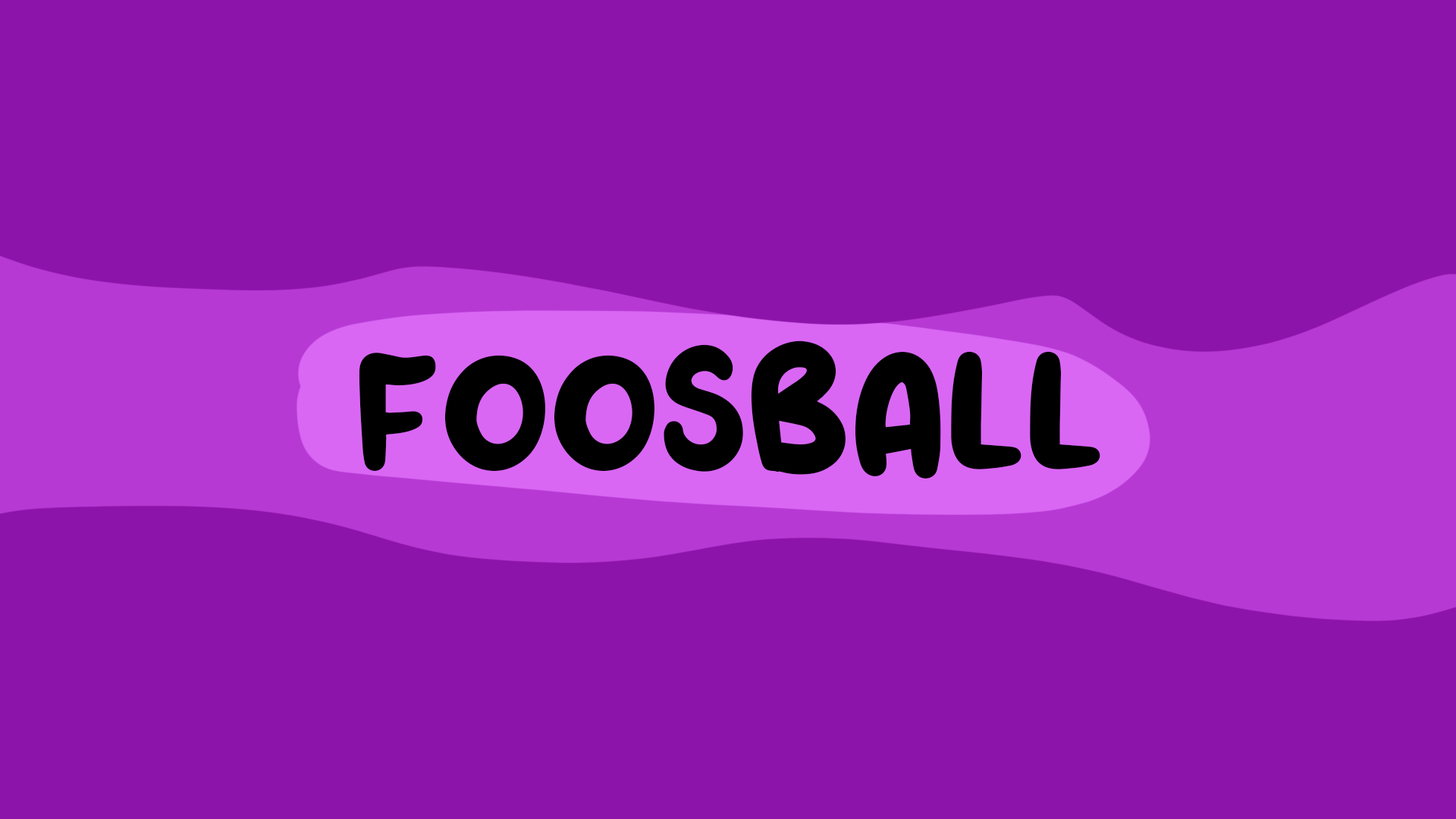
<style>
.page{position:relative;width:1456px;height:819px;background:#8d14aa}
.page>*{position:absolute;margin:0}
.t1{font:145.3px "Pineapple-Days";color:#000000}
</style>
<div class="page">
<p class="t1" style="left:359px;top:340px;width:741px;height:139px">FOOSBALL</p>
</div>
